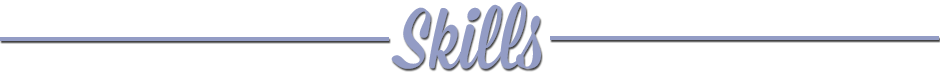
<style>
.page{position:relative;width:940px;height:80px;background:#ffffff}
.page>*{position:absolute;margin:0}
.t1{font:85px "Mission-Script";color:#939cc5}
</style>
<div class="page">
<p class="t1" style="left:391px;top:2px;width:150px;height:67px">Skills</p>
</div>
